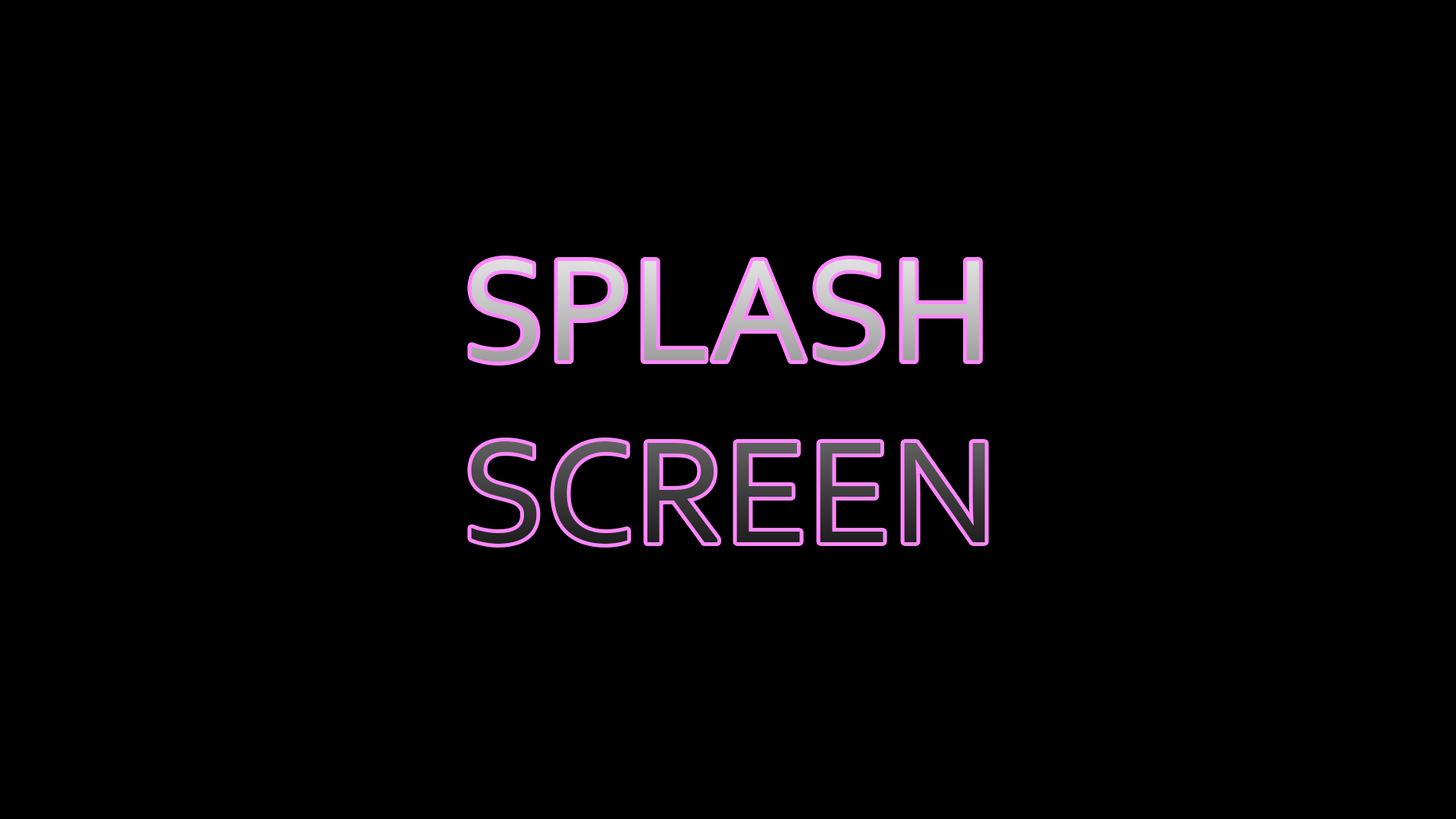
<style>
.page{position:relative;width:1456px;height:819px;background:#000000}
.page>*{position:absolute;margin:0}
.t1{font:151.7px "Corbel"}
</style>
<div class="page">
<p class="t1" style="left:471px;top:259px;width:514px;height:285px">SPLASH<br>SCREEN</p>
</div>
